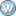
<style>
.page{position:relative;width:16px;height:16px}
.page>*{position:absolute;margin:0}
.t1{font:9px "SunnySide";color:#ffffff;font-variant:small-caps}
</style>
<div class="page">
<p class="t1" style="left:2px;top:4px;width:11px;height:9px">W</p>
</div>
